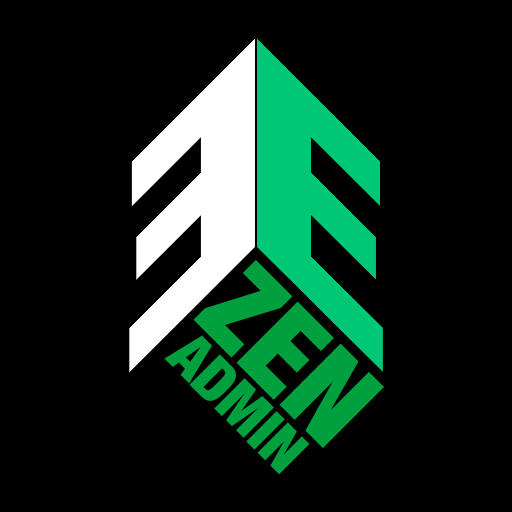
<style>
.page{position:relative;width:512px;height:512px;background:#000000}
.page>*{position:absolute;margin:0}
.t1{font:120.7px "HelveticaNeue-CondensedBlack";color:#00a03e}
.t2{font:60px "HelveticaNeue-CondensedBlack";color:#00a03e}
</style>
<div class="page">
<p class="t1" style="left:193px;top:260px;width:191px;height:188px;rotate:45deg">ZEN</p>
<p class="t2" style="left:164px;top:335px;width:146px;height:140px;rotate:45deg">ADMIN</p>
</div>
